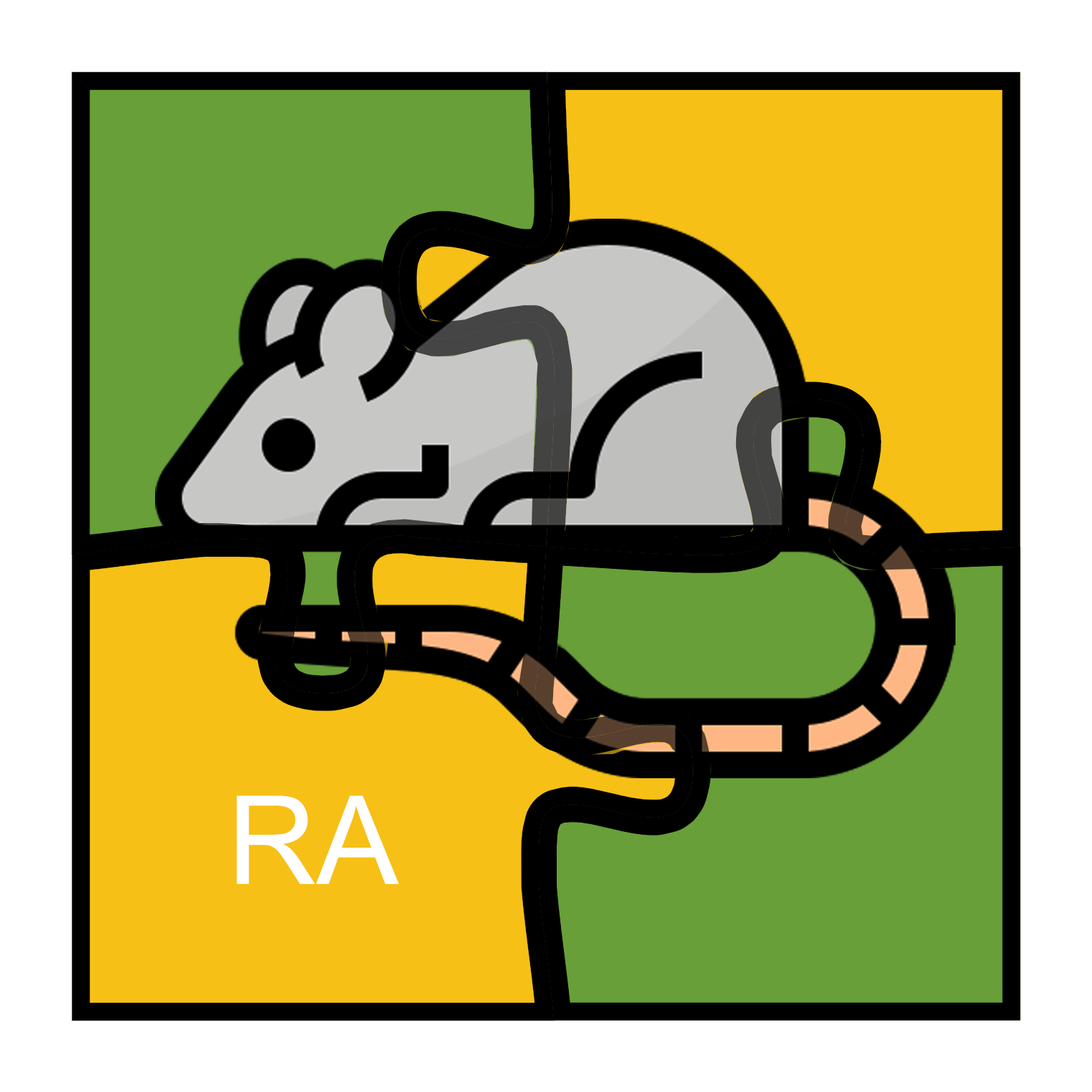
<style>
.page{position:relative;width:1092px;height:1092px;background:#ffffff}
.page>*{position:absolute;margin:0}
.t1{font:123.2px "ArialMT";color:#ffffff}
</style>
<div class="page">
<p class="t1" style="left:237px;top:795px;width:162px;height:89px">RA</p>
</div>
